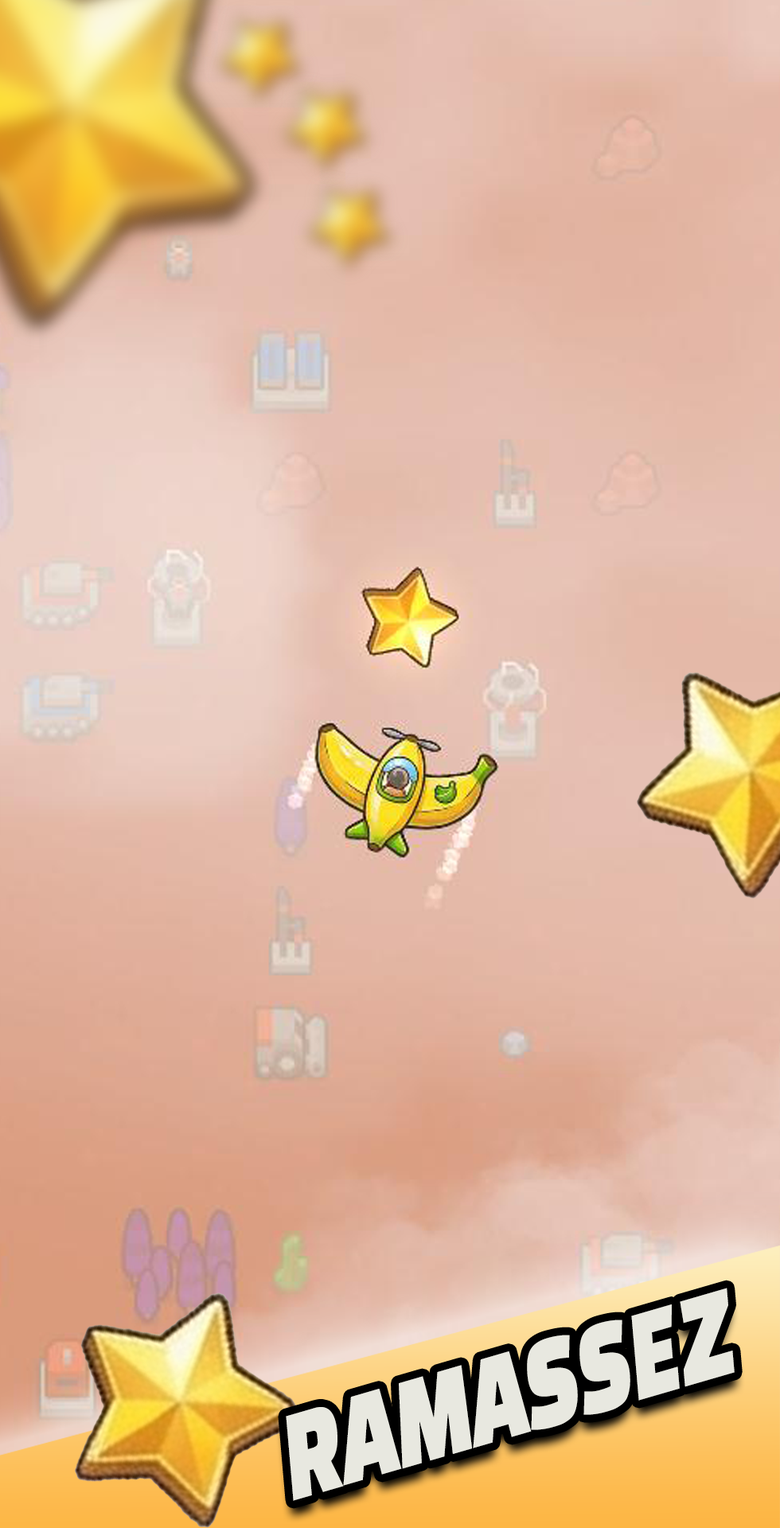
<style>
.page{position:relative;width:780px;height:1528px}
.page>*{position:absolute;margin:0}
.t1{font:135.1px "ChangaOne";color:#e8e8e0;scale:0.7 1}
</style>
<div class="page">
<p class="t1" style="left:286px;top:1288px;width:449px;height:213px;rotate:-16deg">RAMASSEZ</p>
</div>
